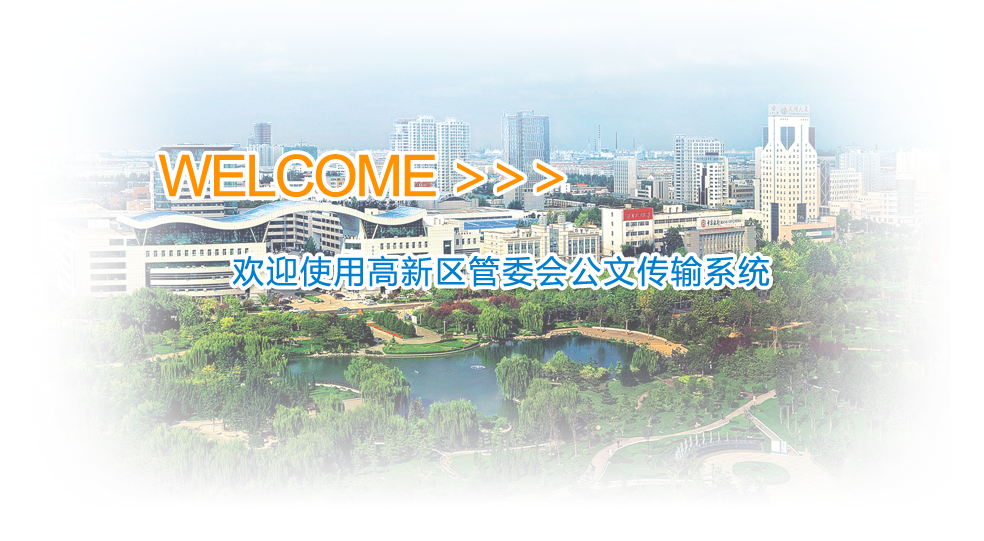
<style>
.page{position:relative;width:984px;height:541px}
.page>*{position:absolute;margin:0}
.t1{font:57.6px "ArialMT";letter-spacing:-0.05em;color:#ff9200}
.t2{font:57.6px "MicrosoftYaHei";letter-spacing:-0.05em;color:#ff9200}
.t3{font:31.4px "MicrosoftYaHei";letter-spacing:0.075em;color:#017fcf}
</style>
<div class="page">
<p class="t1" style="left:158px;top:154px;width:406px;height:43px">WELCOME <span class="t2">&gt;&gt;&gt;</span></p>
<p class="t3" style="left:233px;top:255px;width:537px;height:32px">欢迎使用高新区管委会公文传输系统</p>
</div>
